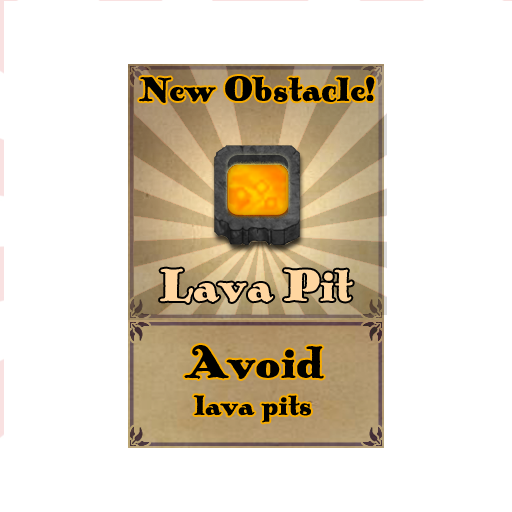
<style>
.page{position:relative;width:512px;height:512px;background:#ffffff}
.page>*{position:absolute;margin:0}
.t1{font:36px "PickworthOldStylePro";color:#000000}
.t2{font:48px "PickworthOldStylePro";color:#ffd6a0}
.t3{font:30px "PickworthOldStylePro";color:#010100}
.t4{font:48px "PickworthOldStylePro";color:#010100}
</style>
<div class="page">
<p class="t1" style="left:139px;top:76px;width:236px;height:27px">New Obstacle!</p>
<p class="t2" style="left:160px;top:268px;width:193px;height:35px">Lava Pit</p>
<p class="t3" style="left:184px;top:345px;width:140px;height:78px;text-align:center"><span class="t4">Avoid <br></span>lava pits</p>
</div>
